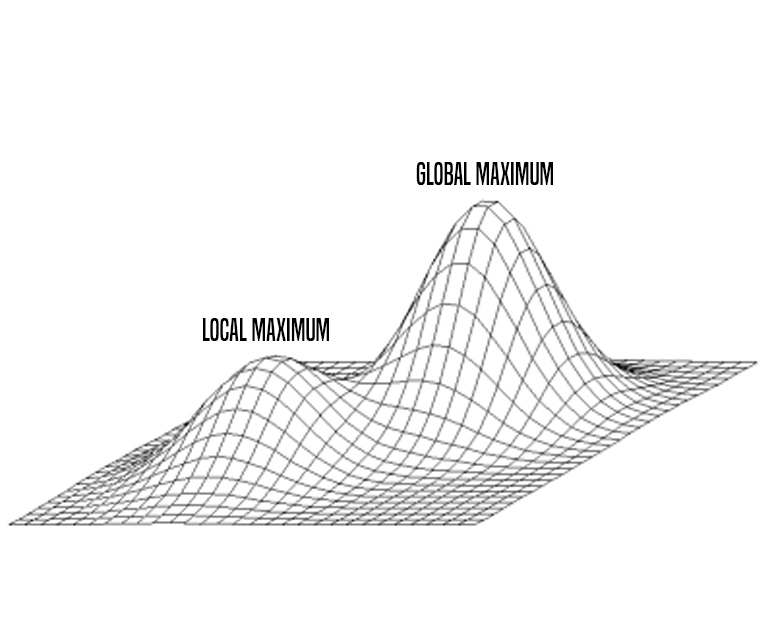
<style>
.page{position:relative;width:770px;height:630px;background:#ffffff}
.page>*{position:absolute;margin:0}
.t1{font:30px "BuiltTitlingRg-Regular";color:#000000}
</style>
<div class="page">
<p class="t1" style="left:416px;top:162px;width:137px;height:23px">Global Maximum</p>
<p class="t1" style="left:203px;top:318px;width:126px;height:23px">Local Maximum</p>
</div>
